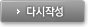
<style>
.page{position:relative;width:88px;height:27px}
.page>*{position:absolute;margin:0}
.t1{font:11px "RixGoB";letter-spacing:-0.01em;color:#ffffff;scale:0.95 1}
</style>
<div class="page">
<p class="t1" style="left:27px;top:6px;width:36px;height:11px">다시작성</p>
</div>
